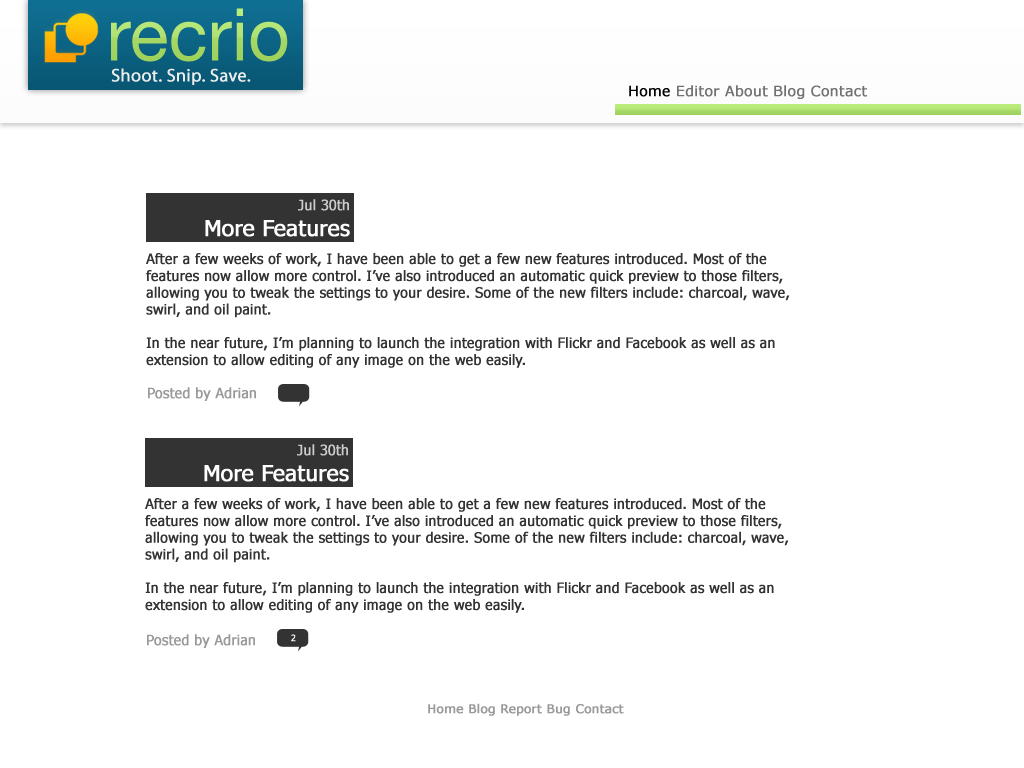
<style>
.page{position:relative;width:1024px;height:768px;background:#ffffff}
.page>*{position:absolute;margin:0}
.t1{font:18px "MyriadPro-Regular";color:#ededed;font-weight:bold}
.t2{font:14px "Verdana";color:#727272;font-weight:bold}
.t3{font:14px "Verdana";color:#030303;font-weight:bold}
.t4{font:14px "Tahoma";color:#cccccc;font-weight:bold}
.t5{font:22.1px "Tahoma";color:#ffffff;font-weight:bold}
.t6{font:14px "Tahoma";color:#333333;font-weight:bold}
.t7{font:14px "Tahoma";color:#999999;font-weight:bold}
.t8{font:8.8px "Tahoma";color:#ffffff;font-weight:bold}
.t9{font:12px "Verdana";color:#999999;font-weight:bold}
</style>
<div class="page">
<p class="t1" style="left:111px;top:68px;width:140px;height:17px">Shoot. Snip. Save.</p>
<p class="t2" style="left:629px;top:85px;width:238px;height:14px"><span class="t3">Home </span>Editor About Blog Contact</p>
<p class="t4" style="left:298px;top:199px;width:51px;height:12px">Jul 30th</p>
<p class="t5" style="left:205px;top:220px;width:145px;height:17px">More Features</p>
<p class="t6" style="left:146px;top:253px;width:644px;height:115px">After a few weeks of work, I have been able to get a few new features introduced. Most of the features now allow more control. I’ve also introduced an automatic quick preview to those filters, allowing you to tweak the settings to your desire. Some of the new filters include: charcoal, wave, swirl, and oil paint.<br><br>In the near future, I’m planning to launch the integration with Flickr and Facebook as well as an extension to allow editing of any image on the web easily.</p>
<p class="t7" style="left:148px;top:387px;width:108px;height:14px">Posted by Adrian</p>
<p class="t4" style="left:297px;top:444px;width:51px;height:12px">Jul 30th</p>
<p class="t5" style="left:204px;top:465px;width:145px;height:17px">More Features</p>
<p class="t6" style="left:145px;top:498px;width:644px;height:115px">After a few weeks of work, I have been able to get a few new features introduced. Most of the features now allow more control. I’ve also introduced an automatic quick preview to those filters, allowing you to tweak the settings to your desire. Some of the new filters include: charcoal, wave, swirl, and oil paint.<br><br>In the near future, I’m planning to launch the integration with Flickr and Facebook as well as an extension to allow editing of any image on the web easily.</p>
<p class="t7" style="left:147px;top:634px;width:108px;height:14px">Posted by Adrian</p>
<p class="t8" style="left:291px;top:634px;width:5px;height:8px">2</p>
<p class="t9" style="left:428px;top:703px;width:196px;height:13px">Home Blog Report Bug Contact</p>
</div>
